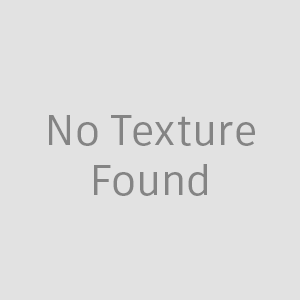
<style>
.page{position:relative;width:300px;height:300px;background:#e2e2e2}
.page>*{position:absolute;margin:0}
.t1{font:41.7px "ArtifaktElement-Book";color:#848484}
</style>
<div class="page">
<p class="t1" style="left:49px;top:115px;width:206px;height:81px;text-align:center">No Texture Found</p>
</div>
